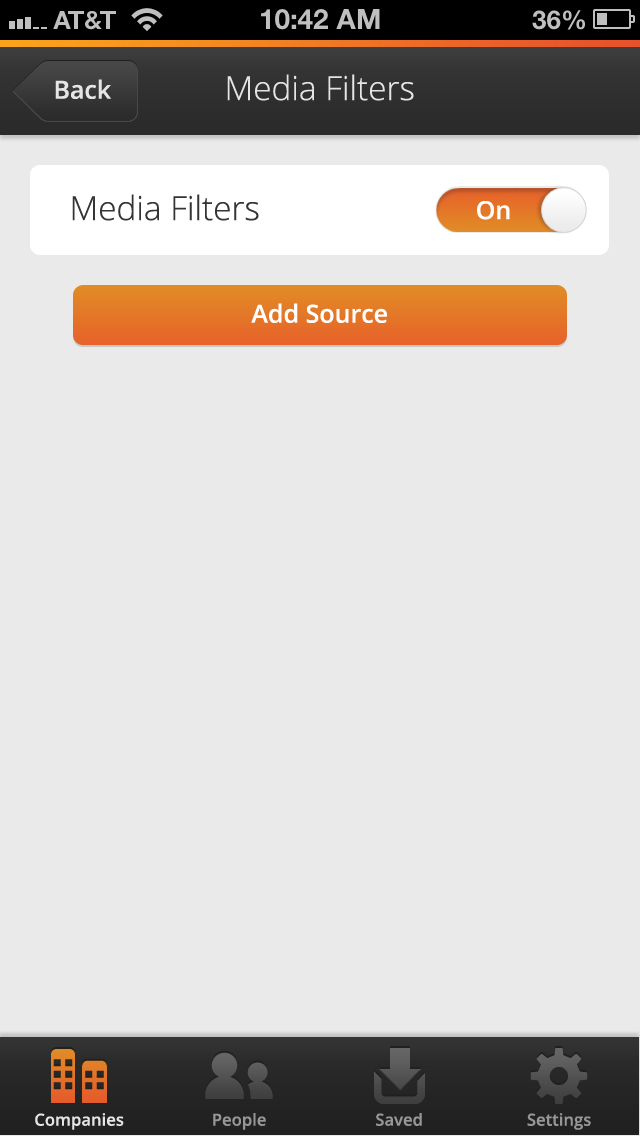
<style>
.page{position:relative;width:640px;height:1136px;background:#eaeaea}
.page>*{position:absolute;margin:0}
.t1{font:33.3px "OpenSans-Light";color:#e5e5e5}
.t2{font:25px "OpenSans-Semibold";color:#e5e5e5}
.t3{font:33.3px "OpenSans-Light";color:#343434}
.t4{font:25px "OpenSans-Semibold";color:#ffffff}
.t5{font:16.7px "OpenSans-Semibold";color:#e5e5e5}
.t6{font:16.7px "OpenSans-Semibold";color:#969696}
</style>
<div class="page">
<p class="t1" style="left:227px;top:74px;width:187px;height:27px">Media Filters</p>
<p class="t2" style="left:55px;top:79px;width:57px;height:20px">Back</p>
<p class="t3" style="left:72px;top:194px;width:187px;height:27px">Media Filters</p>
<p class="t4" style="left:477px;top:201px;width:33px;height:19px">On</p>
<p class="t4" style="left:251px;top:303px;width:136px;height:20px">Add Source</p>
<p class="t5" style="left:35px;top:1113px;width:89px;height:17px">Companies</p>
<p class="t6" style="left:213px;top:1113px;width:53px;height:17px">People</p>
<p class="t6" style="left:376px;top:1113px;width:46px;height:13px">Saved</p>
<p class="t6" style="left:527px;top:1113px;width:64px;height:17px">Settings</p>
</div>
